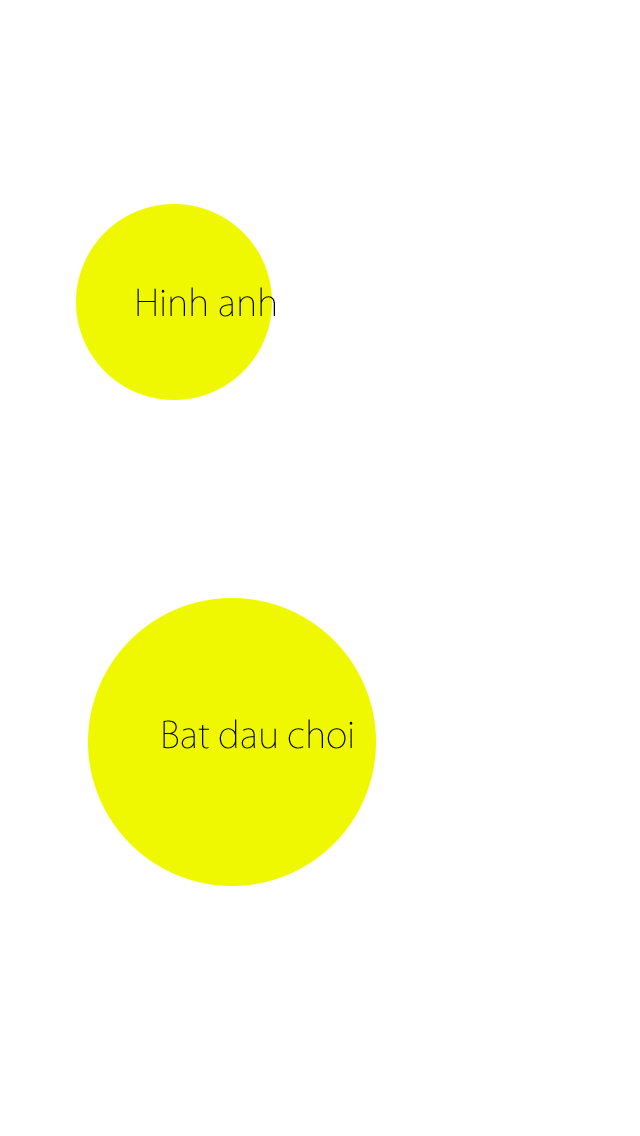
<style>
.page{position:relative;width:640px;height:1136px;background:#ffffff}
.page>*{position:absolute;margin:0}
.t1{font:36px "KozGoPro-ExtraLight";color:#020202}
</style>
<div class="page">
<p class="t1" style="left:137px;top:287px;width:138px;height:30px">Hinh anh</p>
<p class="t1" style="left:163px;top:719px;width:190px;height:30px">Bat dau choi</p>
</div>
